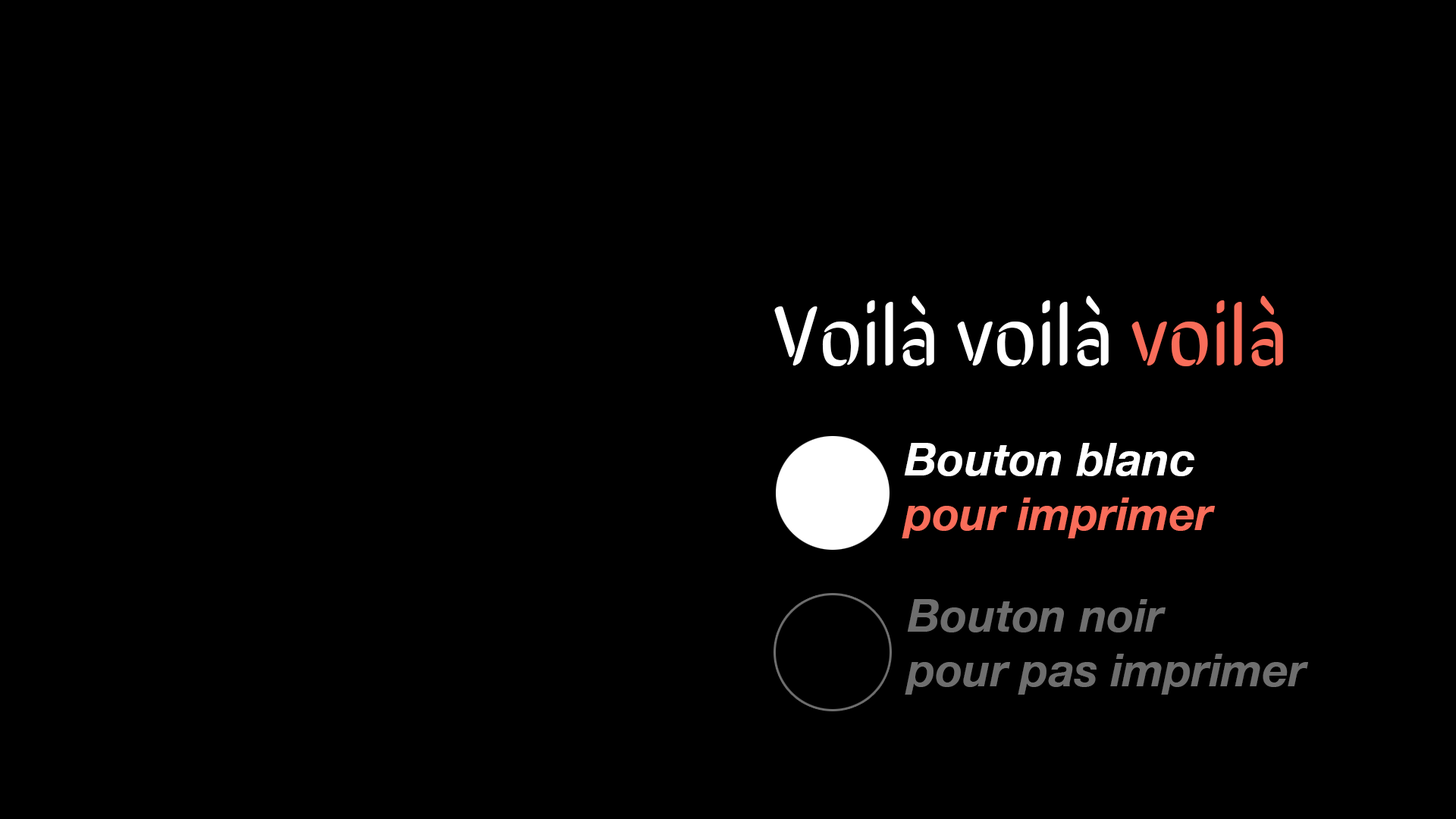
<style>
.page{position:relative;width:1456px;height:819px;background:#000000}
.page>*{position:absolute;margin:0}
.t1{font:84.1px "SirinStencil-Regular";color:#ffffff}
.t2{font:84.1px "SirinStencil-Regular";color:#f96d5a}
.t3{font:45.5px "HelveticaNeue-BoldItalic";color:#f96d5a}
.t4{font:45.5px "HelveticaNeue-BoldItalic";color:#ffffff}
.t5{font:45.5px "HelveticaNeue-BoldItalic";color:#6e6e6e}
</style>
<div class="page">
<p class="t1" style="left:774px;top:296px;width:509px;height:70px">Voilà voilà <span class="t2">voilà</span></p>
<p class="t3" style="left:902px;top:443px;width:313px;height:95px"><span class="t4">Bouton blanc<br></span>pour imprimer</p>
<p class="t5" style="left:905px;top:599px;width:403px;height:96px">Bouton noir<br>pour pas imprimer</p>
</div>
